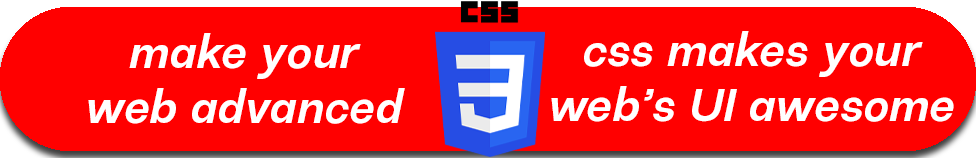
<style>
.page{position:relative;width:976px;height:158px;background:#ff0000}
.page>*{position:absolute;margin:0}
.t1{font:45.8px "ResistSansDisplay-MediumOblique";letter-spacing:0.02em;color:#ffffff}
</style>
<div class="page">
<p class="t1" style="left:88px;top:33px;width:317px;height:91px;text-align:center">make your<br>web advanced</p>
<p class="t1" style="left:551px;top:31px;width:403px;height:91px;text-align:center">css makes your<br>web’s UI awesome</p>
</div>
